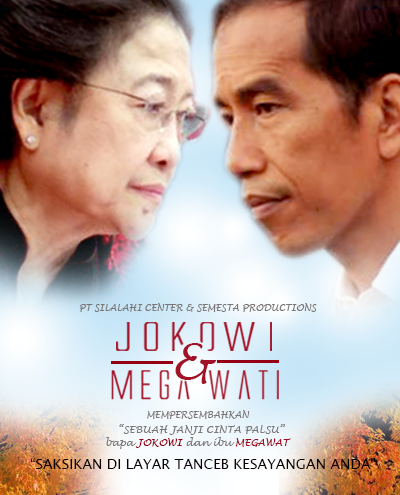
<style>
.page{position:relative;width:400px;height:495px}
.page>*{position:absolute;margin:0}
.t1{font:9px "LucidaHandwriting-Italic";color:#7d7878}
.t2{font:48.2px "LucidaHandwriting-Italic";color:#a31327}
.t3{font:10px "LucidaHandwriting-Italic";color:#7d7878}
.t4{font:10px "LucidaHandwriting-Italic";color:#960014}
.t5{font:10px "LucidaHandwriting-Italic";color:#9e0d22}
.t6{font:14px "LucidaSansUnicode";color:#080001}
</style>
<div class="page">
<p class="t1" style="left:79px;top:303px;width:238px;height:9px">PT SILALAHI CENTER &amp; SEMESTA PRODUCTIONS</p>
<p class="t2" style="left:175px;top:343px;width:42px;height:41px">&amp;</p>
<p class="t1" style="left:147px;top:410px;width:103px;height:9px">MEMPERSEMBAHKAN</p>
<p class="t3" style="left:119px;top:424px;width:166px;height:11px">“SEBUAH JANJI CINTA PALSU”</p>
<p class="t3" style="left:106px;top:437px;width:185px;height:12px">bapa<span class="t4"> JOKOWI</span> dan ibu <span class="t5">MEGAWAT</span></p>
<p class="t6" style="left:30px;top:458px;width:346px;height:11px">“SAKSIKAN DI LAYAR TANCEB KESAYANGAN ANDA”</p>
</div>
